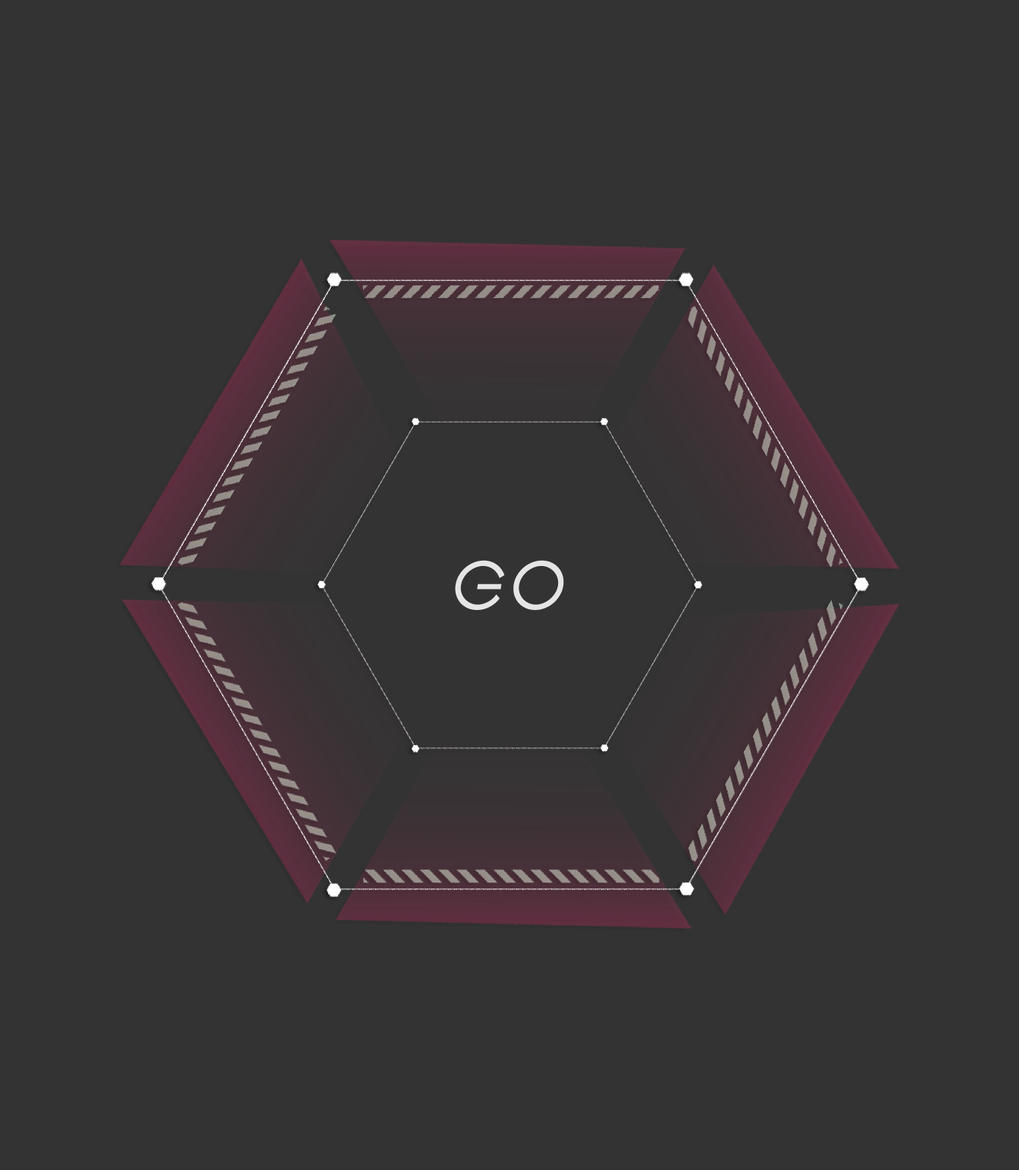
<style>
.page{position:relative;width:1019px;height:1170px;background:#333333}
.page>*{position:absolute;margin:0}
.t1{font:78.1px "EarthOrbiterSemi-Italic";letter-spacing:0.02em;color:#e5e5e5}
</style>
<div class="page">
<p class="t1" style="left:455px;top:560px;width:109px;height:50px">GO</p>
</div>
